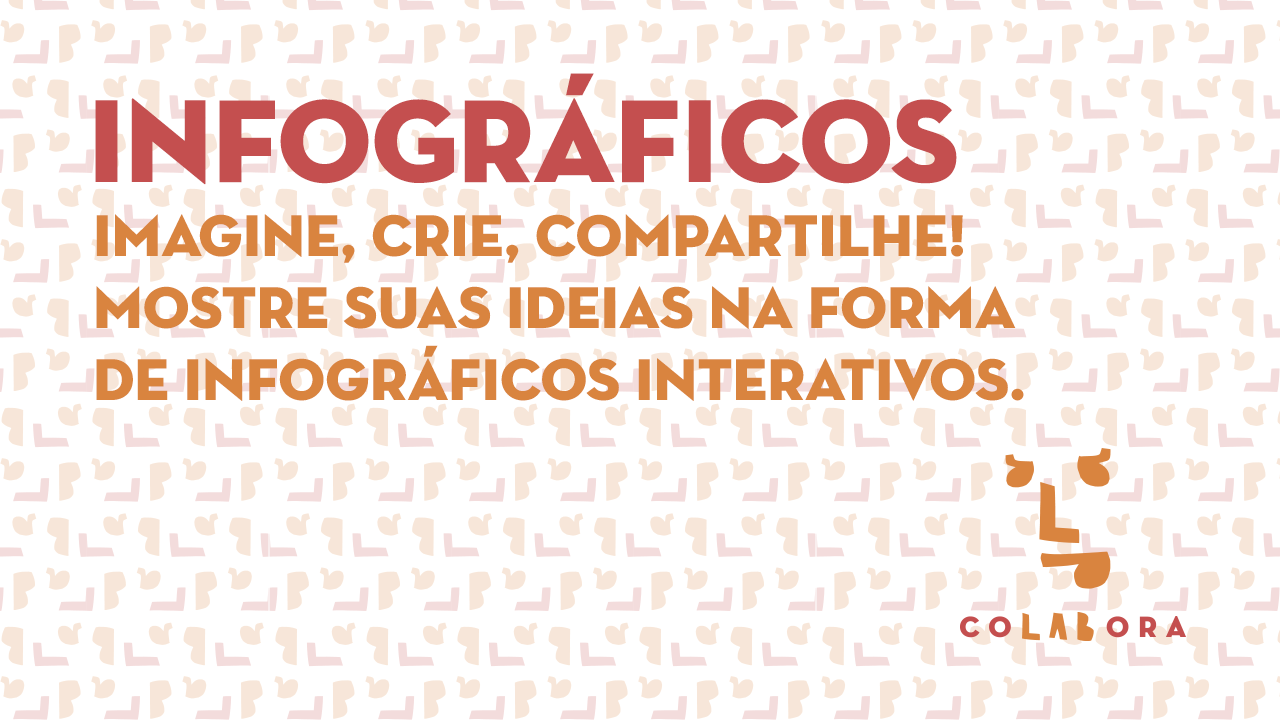
<style>
.page{position:relative;width:1280px;height:720px;background:#ffffff}
.page>*{position:absolute;margin:0}
.t1{font:120px "NeutraDisp-Titling";color:#c44f4f}
.t2{font:60px "NeutraDisp-Titling";color:#d9843f}
</style>
<div class="page">
<p class="t1" style="left:95px;top:73px;width:862px;height:112px">INFOGRÁFICOS</p>
<p class="t2" style="left:96px;top:214px;width:928px;height:187px">imagine, crie, compartilhe!<br>mostre suas ideias na forma<br>de infográficos interativos.</p>
</div>
